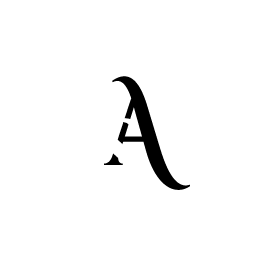
<style>
.page{position:relative;width:276px;height:276px;background:#ffffff}
.page>*{position:absolute;margin:0}
.t1{font:116.2px "CinzelDecorative-Bold";letter-spacing:0.28em;color:#000000;scale:0.74 1}
</style>
<div class="page">
<p class="t1" style="left:104px;top:76px;width:86px;height:114px">A</p>
</div>
